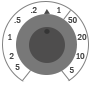
<style>
.page{position:relative;width:90px;height:90px;background:#ffffff}
.page>*{position:absolute;margin:0}
.t1{font:9px "FranklinGothic-MediumCond";color:#4a4a4a}
</style>
<div class="page">
<p class="t1" style="left:14px;top:17px;width:7px;height:6px">.5</p>
<p class="t1" style="left:31px;top:7px;width:6px;height:6px">.2</p>
<p class="t1" style="left:57px;top:7px;width:4px;height:6px">1</p>
<p class="t1" style="left:68px;top:17px;width:9px;height:6px">50</p>
<p class="t1" style="left:8px;top:34px;width:4px;height:6px">1</p>
<p class="t1" style="left:77px;top:34px;width:10px;height:6px">20</p>
<p class="t1" style="left:9px;top:53px;width:5px;height:6px">2</p>
<p class="t1" style="left:76px;top:53px;width:9px;height:6px">10</p>
<p class="t1" style="left:15px;top:64px;width:5px;height:6px">5</p>
<p class="t1" style="left:69px;top:67px;width:5px;height:6px">5</p>
</div>
